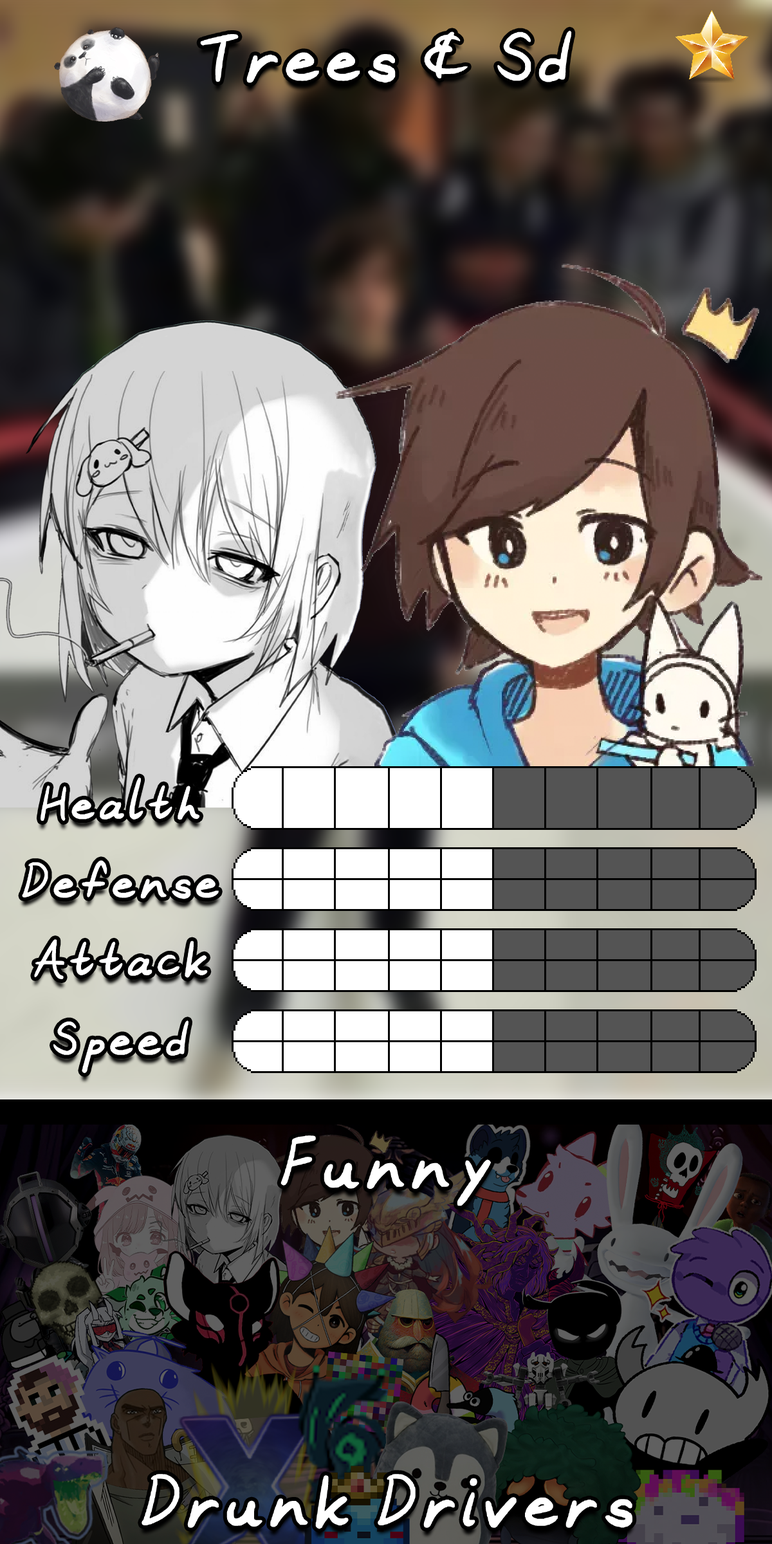
<style>
.page{position:relative;width:772px;height:1544px}
.page>*{position:absolute;margin:0}
.t1{font:135.1px "Tykim_1-Regular";color:#ffffff}
.t2{font:92.7px "Tykim_1-Regular";color:#ffffff}
.t3{font:133.8px "Tykim_1-Regular";color:#ffffff}
</style>
<div class="page">
<p class="t1" style="left:200px;top:30px;width:372px;height:53px">Trees &amp; Sd</p>
<p class="t2" style="left:41px;top:777px;width:159px;height:44px">Health</p>
<p class="t2" style="left:22px;top:860px;width:197px;height:40px">Defense</p>
<p class="t2" style="left:34px;top:939px;width:174px;height:40px">Attack</p>
<p class="t2" style="left:53px;top:1021px;width:136px;height:52px">Speed</p>
<p class="t3" style="left:281px;top:1136px;width:210px;height:70px">Funny</p>
<p class="t1" style="left:142px;top:1474px;width:491px;height:56px">Drunk Drivers</p>
</div>
